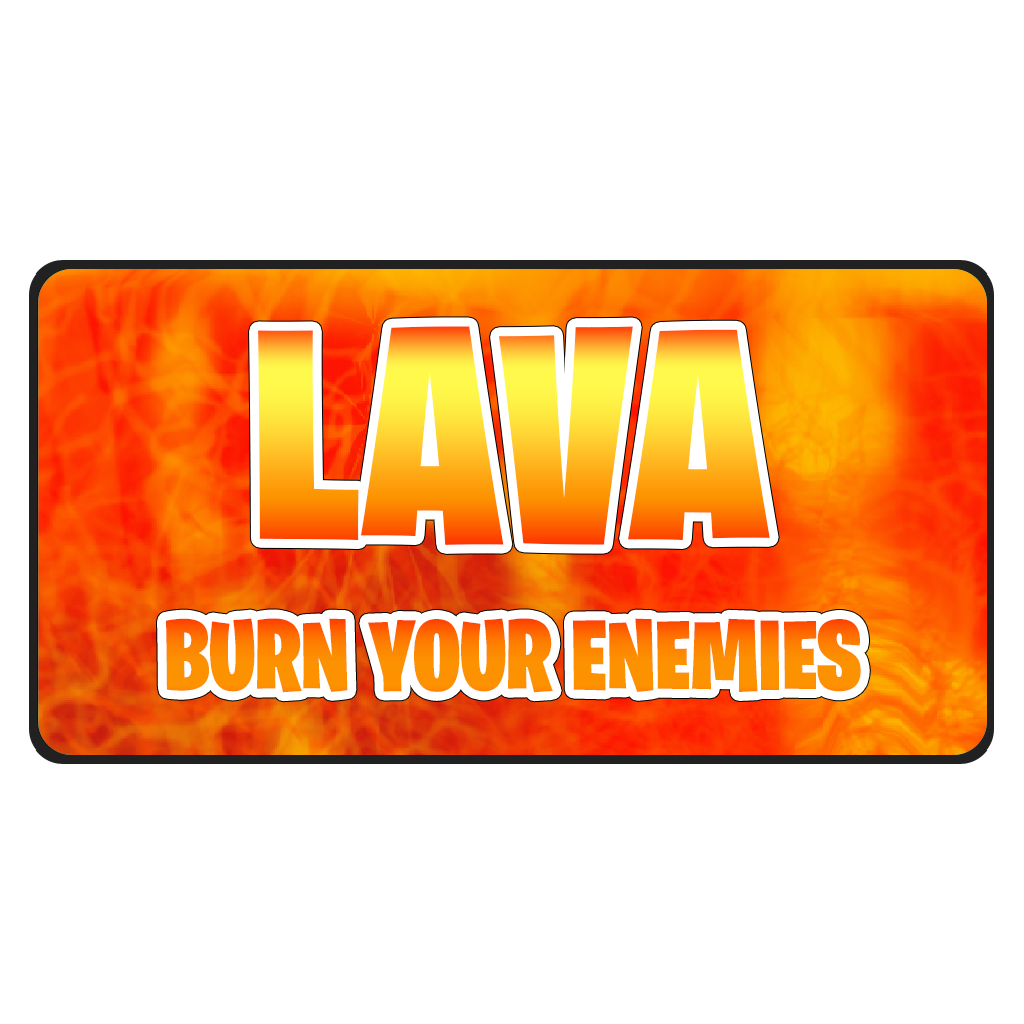
<style>
.page{position:relative;width:1024px;height:1024px;background:#ffffff}
.page>*{position:absolute;margin:0}
.t1{font:304.1px "BurbankBigCondensed-Black"}
.t2{font:100px "BurbankBigCondensed-Black";color:#fd8a01}
</style>
<div class="page">
<p class="t1" style="left:258px;top:326px;width:512px;height:219px">LAVA</p>
<p class="t2" style="left:166px;top:618px;width:695px;height:75px">BURN YOUR ENEMIES</p>
</div>
